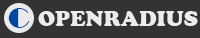
<style>
.page{position:relative;width:200px;height:38px;background:#333333}
.page>*{position:absolute;margin:0}
.t1{font:30px "Broadway";color:#00479d}
.t2{font:22px "CooperBlack";color:#ebecec}
</style>
<div class="page">
<p class="t1" style="left:8px;top:8px;width:21px;height:20px">C</p>
<p class="t2" style="left:38px;top:11px;width:160px;height:15px">OPENRADIUS</p>
</div>
